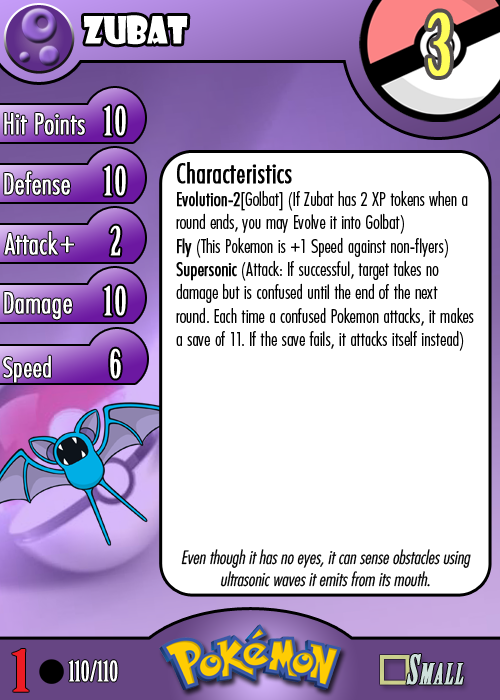
<style>
.page{position:relative;width:500px;height:700px;background:#ffffff}
.page>*{position:absolute;margin:0}
.t1{font:36.7px "ShowcardGothic-Reg";letter-spacing:-0.025em;color:#ffffff;scale:0.91 1}
.t2{font:83.3px "BirchStd";letter-spacing:0.025em;color:#fffd59;font-weight:bold}
.t3{font:27.8px "Futura-CondensedLight";color:#ffffff;font-weight:bold}
.t4{font:38.9px "BirchStd";letter-spacing:0.035em;color:#ffffff;font-weight:bold}
.t5{font:19.4px "FuturaCondensedBQ-Light";color:#010101}
.t6{font:27.8px "FuturaCondensedBQ-Light";color:#010101;font-weight:bold}
.t7{font:19.4px "FuturaCondensedBQ-Light";color:#010101;font-weight:bold}
.t8{font:30.6px "Futura-CondensedLight";color:#ffffff;font-weight:bold}
.t9{font:27.8px "FuturaCondensedBQ-Light";color:#ffffff;font-weight:bold}
.t10{font:18.1px "Futura-CondensedLight";color:#010101;font-style:italic}
.t11{font:55.6px "BirchStd";color:#ed1c24;font-weight:bold;scale:1.5 1}
.t12{font:27.8px "BirchStd";color:#ffffff;font-weight:bold}
</style>
<div class="page">
<p class="t1" style="left:84px;top:15px;width:104px;height:30px">zubat</p>
<p class="t2" style="left:428px;top:12px;width:22px;height:64px">3</p>
<p class="t3" style="left:4px;top:113px;width:81px;height:22px">Hit Points</p>
<p class="t4" style="left:104px;top:105px;width:22px;height:31px">10</p>
<p class="t3" style="left:4px;top:171px;width:66px;height:24px">Defense</p>
<p class="t4" style="left:104px;top:165px;width:22px;height:31px">10</p>
<p class="t5" style="left:176px;top:162px;width:298px;height:189px"><span class="t6">Characteristics<br></span><span class="t7">Evolution-2</span>[Golbat] (If Zubat has 2 XP tokens when a round ends, you may Evolve it into Golbat)<br><span class="t7">Fly</span> (This Pokemon is +1 Speed against non-flyers)<br><span class="t7">Supersonic</span> (Attack: If successful, target takes no damage but is confused until the end of the next round. Each time a confused Pokemon attacks, it makes a save of 11. If the save fails, it attacks itself instead)</p>
<p class="t3" style="left:4px;top:231px;width:54px;height:24px">Attack</p>
<p class="t4" style="left:110px;top:225px;width:11px;height:31px">2</p>
<p class="t8" style="left:60px;top:236px;width:14px;height:17px">+</p>
<p class="t3" style="left:4px;top:292px;width:68px;height:28px">Damage</p>
<p class="t4" style="left:104px;top:285px;width:22px;height:31px">10</p>
<p class="t4" style="left:110px;top:348px;width:11px;height:31px">6</p>
<p class="t9" style="left:3px;top:355px;width:48px;height:28px">Speed</p>
<p class="t10" style="left:181px;top:549px;width:290px;height:38px;text-align:center">Even though it has no eyes, it can sense obstacles using ultrasonic waves it emits from its mouth.</p>
<p class="t11" style="left:12px;top:649px;width:17px;height:43px">1</p>
<p class="t12" style="left:68px;top:660px;width:50px;height:22px">110/110</p>
</div>
